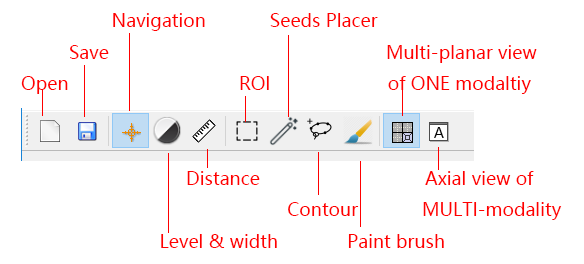
<style>
.page{position:relative;width:584px;height:264px;background:#ffffff}
.page>*{position:absolute;margin:0}
.t1{font:18px "MicrosoftYaHeiUI";color:#ff0000}
</style>
<div class="page">
<p class="t1" style="left:21px;top:13px;width:541px;height:235px">Navigation            Seeds Placer<br>         Save                                                    Multi-planar view<br>Open                                ROI                      of ONE modaltiy<br><br>                        <br>                               Distance                               Axial view of<br>                                                  Contour            MULTI-modality<br>                          Level &amp; width             Paint brush</p>
</div>
